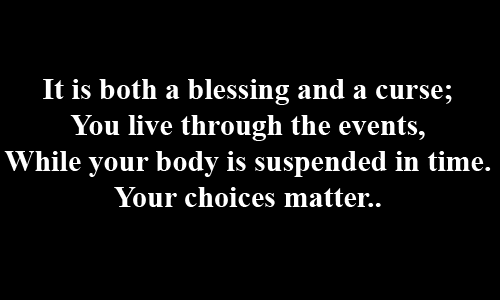
<style>
.page{position:relative;width:500px;height:300px;background:#000000}
.page>*{position:absolute;margin:0}
.t1{font:30px "TimesNewRomanPS-BoldMT";color:#ffffff}
</style>
<div class="page">
<p class="t1" style="left:4px;top:79px;width:487px;height:128px;text-align:center">It is both a blessing and a curse;<br>You live through the events,<br>While your body is suspended in time.<br>Your choices matter..</p>
</div>
